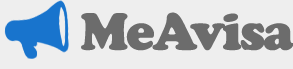
<style>
.page{position:relative;width:293px;height:69px;background:#eeeeee}
.page>*{position:absolute;margin:0}
.t1{font:51.3px "CooperBlackStd";letter-spacing:-0.04em;color:#6c6c6c}
</style>
<div class="page">
<p class="t1" style="left:81px;top:12px;width:213px;height:39px">MeAvisa</p>
</div>
